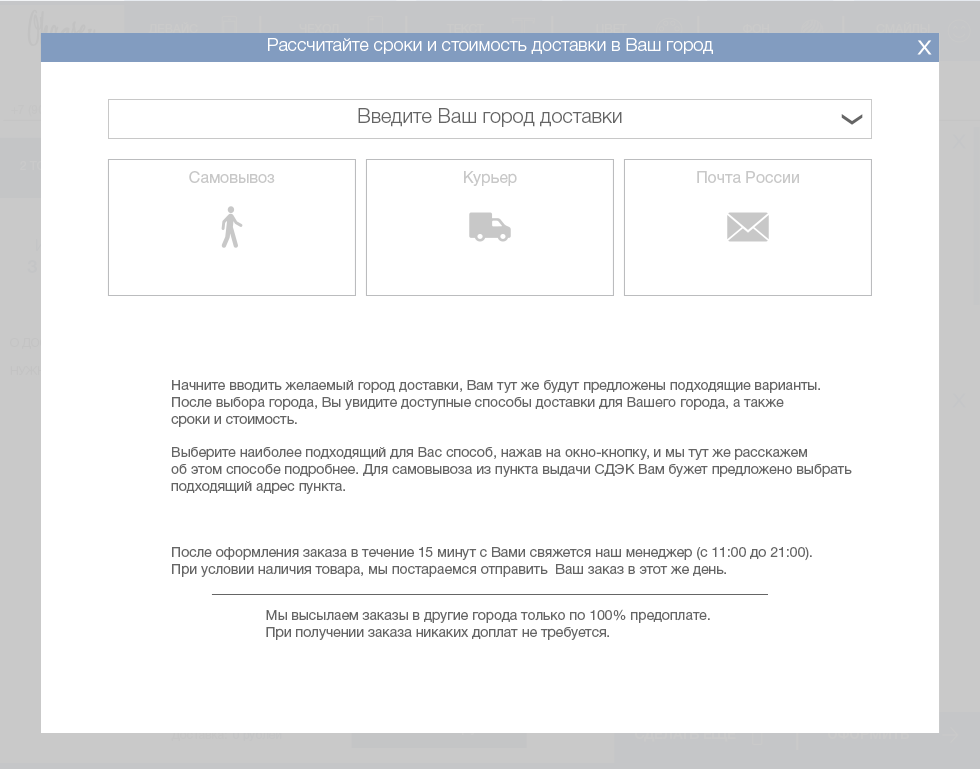
<style>
.page{position:relative;width:980px;height:769px;background:#ffffff}
.page>*{position:absolute;margin:0}
.t1{font:12px "HelveticaNeueCyr-Roman";color:#cacaca}
.t2{font:18px "HelveticaNeueCyr-Light";color:#ffffff}
.t3{font:20px "HelveticaNeueCyr-Light";color:#656565}
.t4{font:16px "HelveticaNeueCyr-Roman";color:#c8c8c8}
.t5{font:14px "HelveticaNeueCyr-Roman";color:#656565}
</style>
<div class="page">
<p class="t1" style="left:148px;top:22px;width:50px;height:13px">ДЕВАЙС</p>
<p class="t1" style="left:299px;top:24px;width:40px;height:10px">ЧЕХОЛ</p>
<p class="t1" style="left:446px;top:24px;width:38px;height:9px">ТЕКСТ</p>
<p class="t1" style="left:596px;top:24px;width:31px;height:11px">ЦВЕТ</p>
<p class="t1" style="left:743px;top:24px;width:26px;height:9px">ФОН</p>
<p class="t1" style="left:876px;top:22px;width:54px;height:12px">СМАЙЛЫ</p>
<p class="t2" style="left:268px;top:38px;width:445px;height:16px">Рассчитайте сроки и стоимость доставки в Ваш город</p>
<p class="t3" style="left:358px;top:108px;width:264px;height:19px">Введите Ваш город доставки</p>
<p class="t4" style="left:189px;top:171px;width:86px;height:12px">Самовывоз</p>
<p class="t4" style="left:464px;top:171px;width:53px;height:15px">Курьер</p>
<p class="t4" style="left:697px;top:171px;width:102px;height:12px">Почта России</p>
<p class="t5" style="left:171px;top:380px;width:681px;height:114px">Начните вводить желаемый город доставки, Вам тут же будут предложены подходящие варианты.<br>После выбора города, Вы увидите доступные способы доставки для Вашего города, а также<br>сроки и стоимость.<br><br>Выберите наиболее подходящий для Вас способ, нажав на окно-кнопку, и мы тут же расскажем<br>об этом способе подробнее. Для самовывоза из пункта выдачи СДЭК Вам бужет предложено выбрать<br>подходящий адрес пункта.</p>
<p class="t5" style="left:172px;top:547px;width:640px;height:30px">После оформления заказа в течение 15 минут с Вами свяжется наш менеджер (с 11:00 до 21:00).<br>При условии наличия товара, мы постараемся отправить  Ваш заказ в этот же день.</p>
<p class="t5" style="left:266px;top:609px;width:444px;height:31px">Мы высылаем заказы в другие города только по 100% предоплате. <br>При получении заказа никаких доплат не требуется.</p>
</div>
